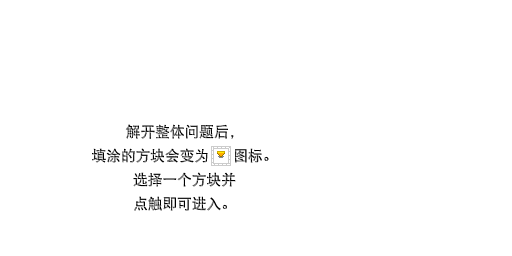
<style>
.page{position:relative;width:512px;height:256px;background:#ffffff}
.page>*{position:absolute;margin:0}
.t1{font:14.7px/24px "DFPHeiW5-GB"}
</style>
<div class="page">
<p class="t1" style="left:92px;top:124px;width:177px;height:87px;text-align:center">解开整体问题后，<br>填涂的方块会变为     图标。<br>选择一个方块并<br>点触即可进入。</p>
</div>
